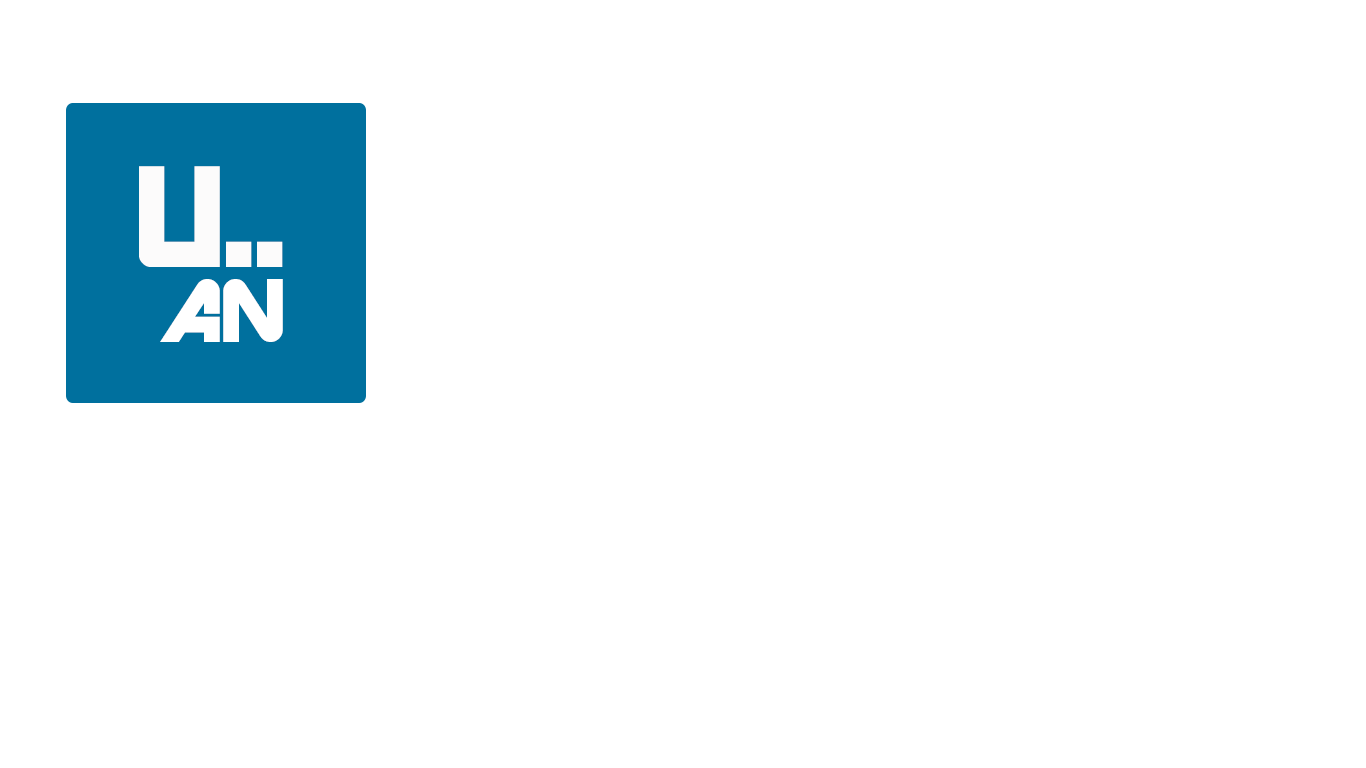
<style>
.page{position:relative;width:1366px;height:768px;background:#ffffff}
.page>*{position:absolute;margin:0}
.t1{font:160px "ARDESTINE";letter-spacing:-0.025em;color:#fcfbfb;text-transform:uppercase}
.t2{font:100px "ARDESTINE";letter-spacing:-0.025em;color:#ffffff;text-transform:uppercase}
</style>
<div class="page">
<p class="t1" style="left:139px;top:166px;width:144px;height:101px">u..</p>
<p class="t2" style="left:160px;top:279px;width:123px;height:63px">an</p>
</div>
